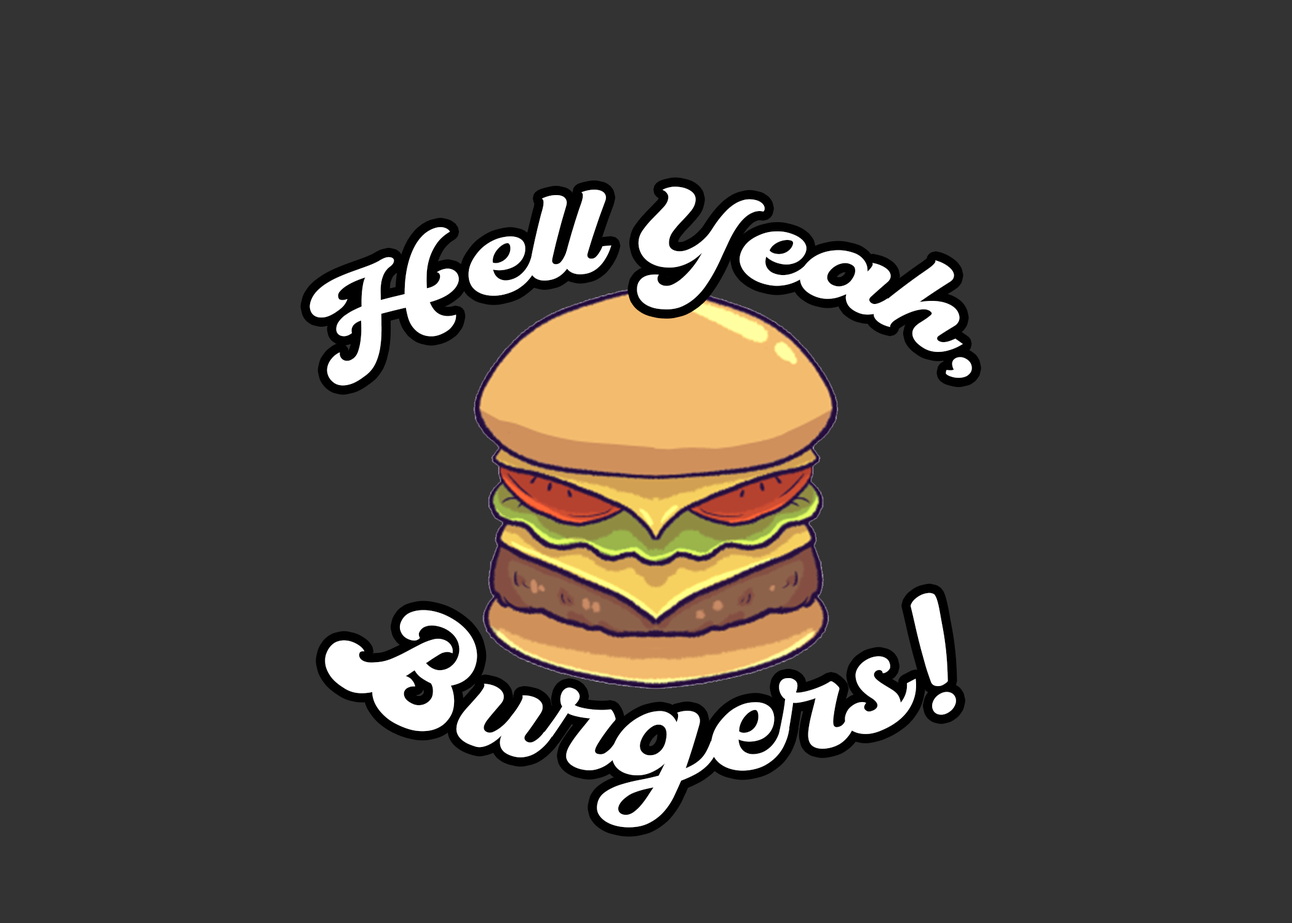
<style>
.page{position:relative;width:1292px;height:923px;background:#333333}
.page>*{position:absolute;margin:0}
.t1{font:128.2px "RamdoneScriptDemo";color:#ffffff}
.t2{font:153.8px "RamdoneScriptDemo";color:#ffffff}
</style>
<div class="page">
<p class="t1" style="left:309px;top:186px;width:663px;height:200px">Hell Yeah,</p>
<p class="t2" style="left:325px;top:592px;width:631px;height:236px">Burgers!</p>
</div>
